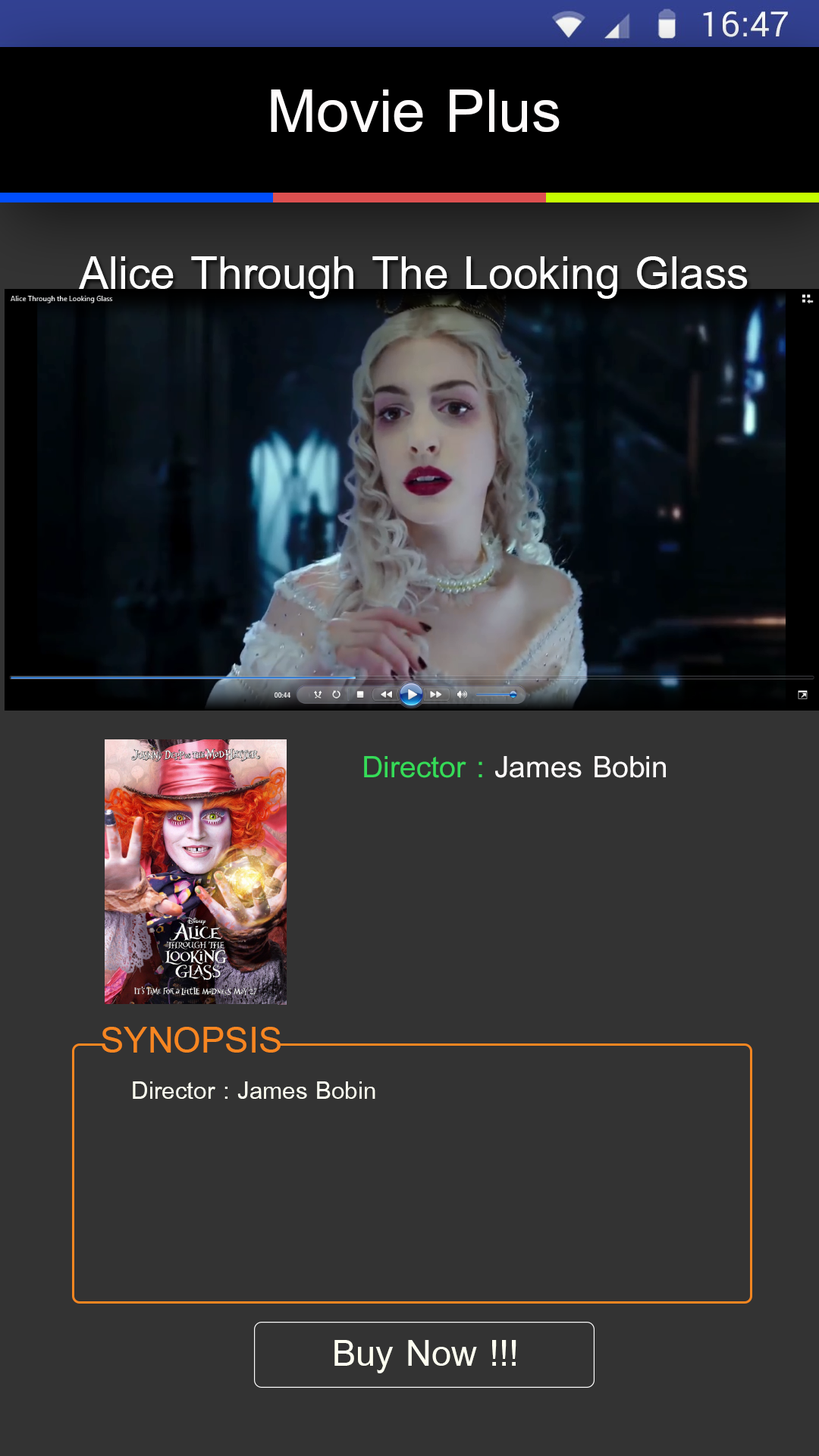
<style>
.page{position:relative;width:819px;height:1456px;background:#333333}
.page>*{position:absolute;margin:0}
.t1{font:91px "BrowalliaNew";color:#fefbfb}
.t2{font:68.2px "BrowalliaNew";color:#ffffff}
.t3{font:45.4px "BrowalliaNew";color:#fefbfb}
.t4{font:45.4px "BrowalliaNew";color:#35dc58}
.t5{font:54.6px "BrowalliaNew";color:#f78621}
.t6{font:36.4px "BrowalliaNew";color:#fefff1}
.t7{font:54.6px "BrowalliaNew";color:#fefff1}
</style>
<div class="page">
<p class="t1" style="left:271px;top:89px;width:289px;height:43px">Movie Plus</p>
<p class="t2" style="left:79px;top:256px;width:669px;height:43px">Alice Through The Looking Glass</p>
<p class="t3" style="left:364px;top:756px;width:302px;height:22px"><span class="t4">Director :</span> James Bobin</p>
<p class="t5" style="left:102px;top:1027px;width:179px;height:26px">SYNOPSIS</p>
<p class="t6" style="left:133px;top:1081px;width:242px;height:18px">Director : James Bobin</p>
<p class="t7" style="left:334px;top:1340px;width:182px;height:33px">Buy Now !!!</p>
</div>
